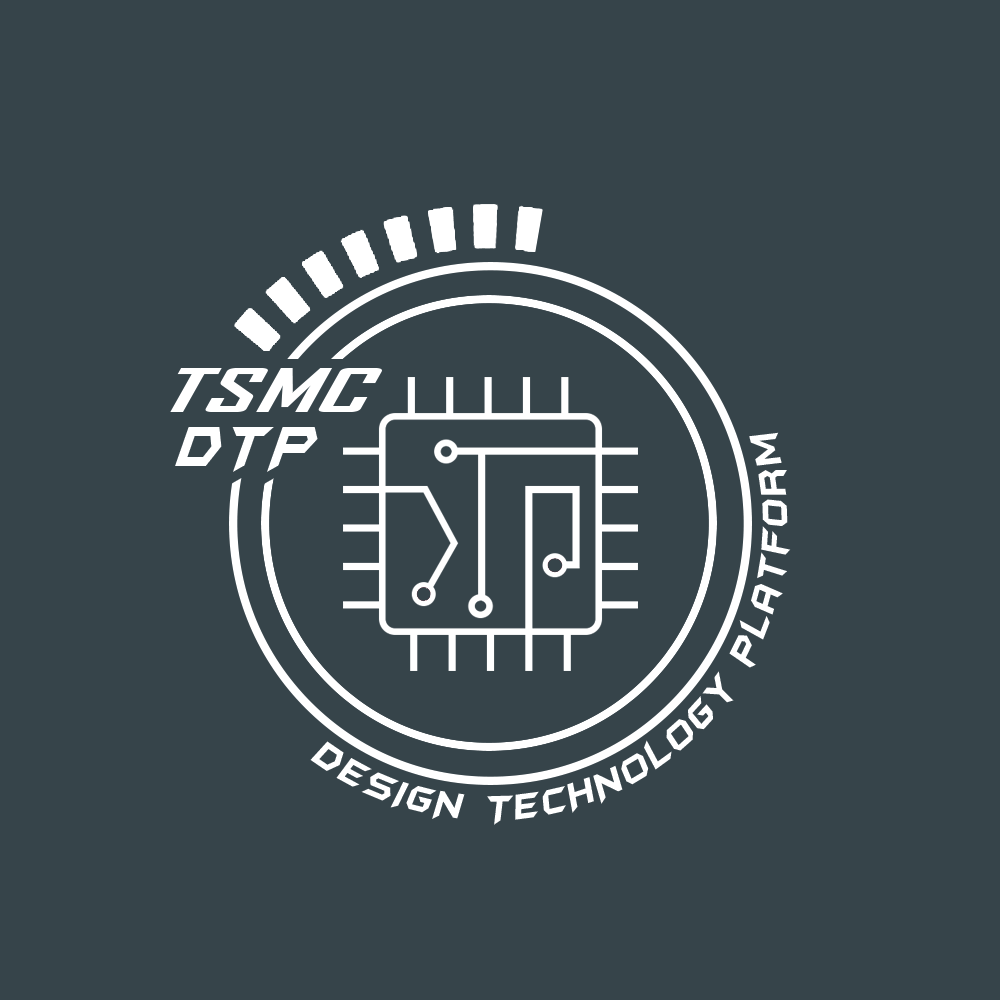
<style>
.page{position:relative;width:1000px;height:1000px;background:#36444a}
.page>*{position:absolute;margin:0}
.t1{font:59.8px "AgencyFB-Bold";letter-spacing:0.005em;color:#ffffff;font-style:italic;scale:1.86 1}
.t2{font:66.7px "BatmanForeverAlternate";letter-spacing:0.1em;color:#ffffff;font-style:italic;scale:0.78 1}
.t3{font:66.7px "BatmanForeverAlternate";color:#ffffff;font-style:italic;scale:0.78 1}
.t4{font:41.7px "BatmanForeverAlternate";letter-spacing:0.1em;color:#ffffff;font-style:italic;scale:0.8 1}
</style>
<div class="page">
<p class="t1" style="left:170px;top:368px;width:212px;height:44px">TSMC</p>
<p class="t2" style="left:175px;top:427px;width:143px;height:45px"><span class="t3">D</span>TP</p>
<p class="t4" style="left:310px;top:432px;width:481px;height:393px;rotate:60deg">DESIGN TECHNOlogy platform</p>
</div>
